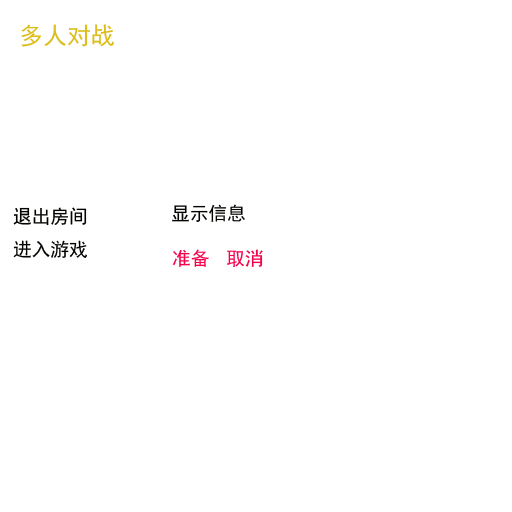
<style>
.page{position:relative;width:512px;height:512px;background:#ffffff}
.page>*{position:absolute;margin:0}
.t1{font:24px "SimHei";color:#dbbd1b}
.t2{font:18.7px "SimHei";color:#030300}
.t3{font:18.7px "SimHei";color:#f4024c}
</style>
<div class="page">
<p class="t1" style="left:21px;top:24px;width:94px;height:23px">多人对战</p>
<p class="t2" style="left:13px;top:207px;width:74px;height:19px">退出房间</p>
<p class="t2" style="left:172px;top:204px;width:73px;height:18px">显示信息</p>
<p class="t2" style="left:13px;top:240px;width:74px;height:18px">进入游戏</p>
<p class="t3" style="left:172px;top:249px;width:37px;height:18px">准备</p>
<p class="t3" style="left:227px;top:249px;width:36px;height:18px">取消</p>
</div>
